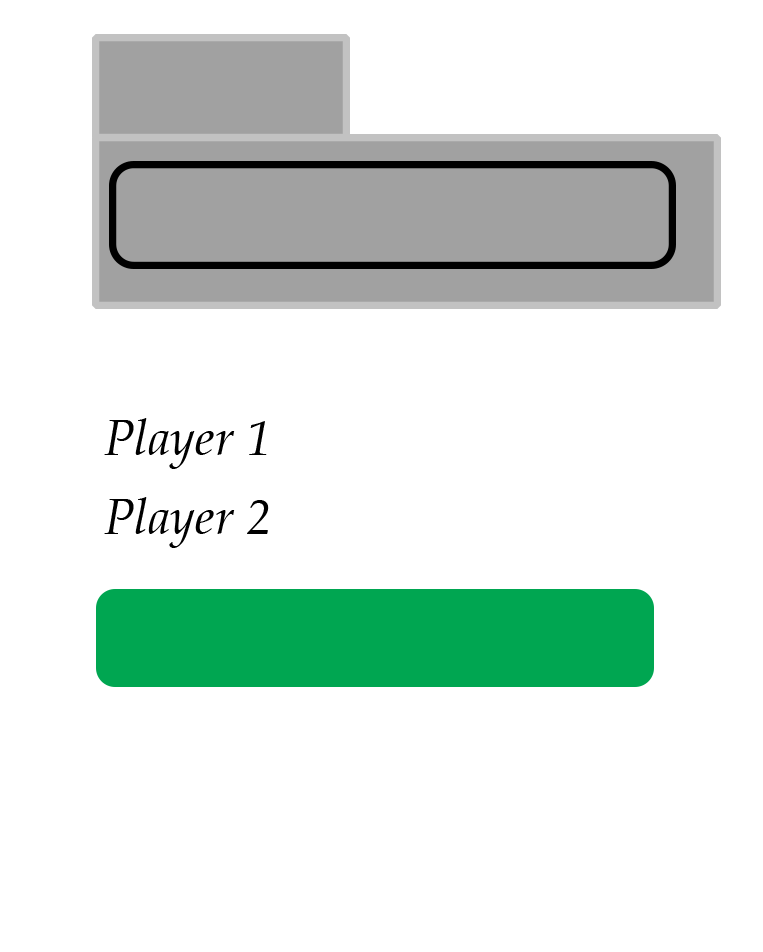
<style>
.page{position:relative;width:763px;height:952px;background:#ffffff}
.page>*{position:absolute;margin:0}
.t1{font:12px "Palatino-Italic";color:#000000}
</style>
<div class="page">
<p class="t1" style="left:104px;top:418px;width:163px;height:51px">Player 1</p>
<p class="t1" style="left:104px;top:497px;width:165px;height:51px">Player 2</p>
</div>
